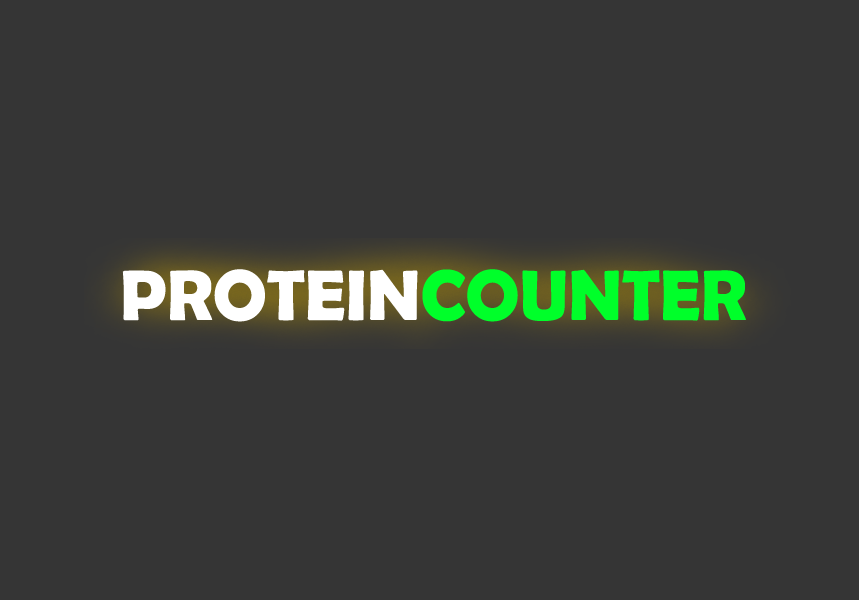
<style>
.page{position:relative;width:859px;height:600px;background:#353535}
.page>*{position:absolute;margin:0}
.t1{font:72px "BerlinSansFBDemi-Bold";color:#ffffff}
.t2{font:72px "BerlinSansFBDemi-Bold";color:#00ff2a}
</style>
<div class="page">
<p class="t1" style="left:122px;top:269px;width:624px;height:53px">PROTEIN<span class="t2">COUNTER</span></p>
</div>
